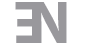
<style>
.page{position:relative;width:90px;height:45px;background:#ffffff}
.page>*{position:absolute;margin:0}
.t1{font:60px "MyriadPro-Bold";color:#99989c}
</style>
<div class="page">
<p class="t1" style="left:15px;top:2px;width:26px;height:41px;rotate:180deg">E</p>
<p class="t1" style="left:33px;top:2px;width:34px;height:41px">N</p>
</div>
